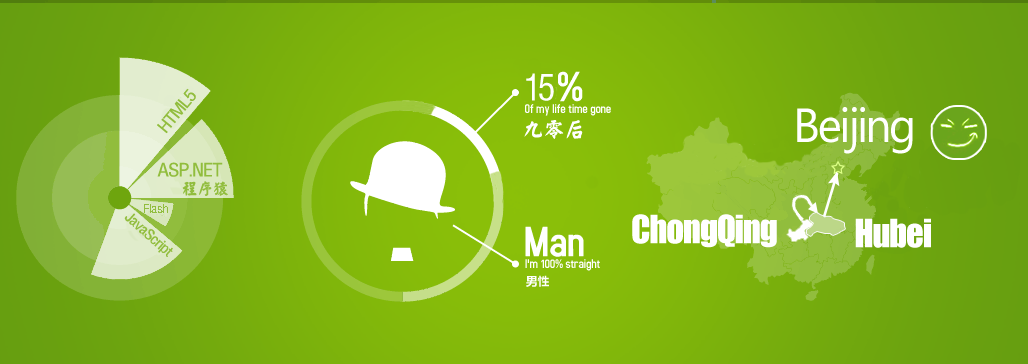
<style>
.page{position:relative;width:1028px;height:364px}
.page>*{position:absolute;margin:0}
.t1{font:36px "FZYTK--GBK1-0";letter-spacing:-0.01em;color:#ffffff}
.t2{font:16.6px "FZYTK--GBK1-0";letter-spacing:-0.01em;color:#91bd3d;scale:1.13 1}
.t3{font:48px "KhmerUI";letter-spacing:-0.01em;color:#ffffff;scale:0.97 1}
.t4{font:24px "FashionFont052,by-www.6763.net";letter-spacing:-0.01em;color:#ffffff;scale:0.97 1}
.t5{font:18px "FZYTK--GBK1-0";letter-spacing:-0.01em;color:#91bd3d;scale:1.13 1}
.t6{font:18px "FashionFont052,by-www.6763.net";letter-spacing:-0.01em;color:#91bd3d}
.t7{font:12px "FZYTK--GBK1-0";letter-spacing:-0.01em;color:#91bd3d;scale:1.13 1}
.t8{font:14px "FZYTK--GBK1-0";letter-spacing:-0.01em;color:#91bd3d;scale:1.13 1}
.t9{font:36px "Impact";letter-spacing:-0.01em;color:#ffffff;scale:0.97 1}
</style>
<div class="page">
<p class="t1" style="left:526px;top:73px;width:28px;height:28px">15</p>
<p class="t2" style="left:157px;top:88px;width:39px;height:46px;rotate:-50deg">HTML5</p>
<p class="t3" style="left:797px;top:107px;width:116px;height:47px">Beijing</p>
<p class="t4" style="left:524px;top:120px;width:59px;height:19px">九零后</p>
<p class="t5" style="left:157px;top:162px;width:66px;height:15px">ASP.NET</p>
<p class="t6" style="left:182px;top:181px;width:46px;height:15px">程序猿</p>
<p class="t7" style="left:144px;top:204px;width:24px;height:9px">Flash</p>
<p class="t8" style="left:124px;top:213px;width:49px;height:44px;rotate:42deg">JavaScript</p>
<p class="t9" style="left:632px;top:214px;width:145px;height:34px">ChongQing</p>
<p class="t9" style="left:855px;top:218px;width:76px;height:30px">Hubei</p>
</div>
